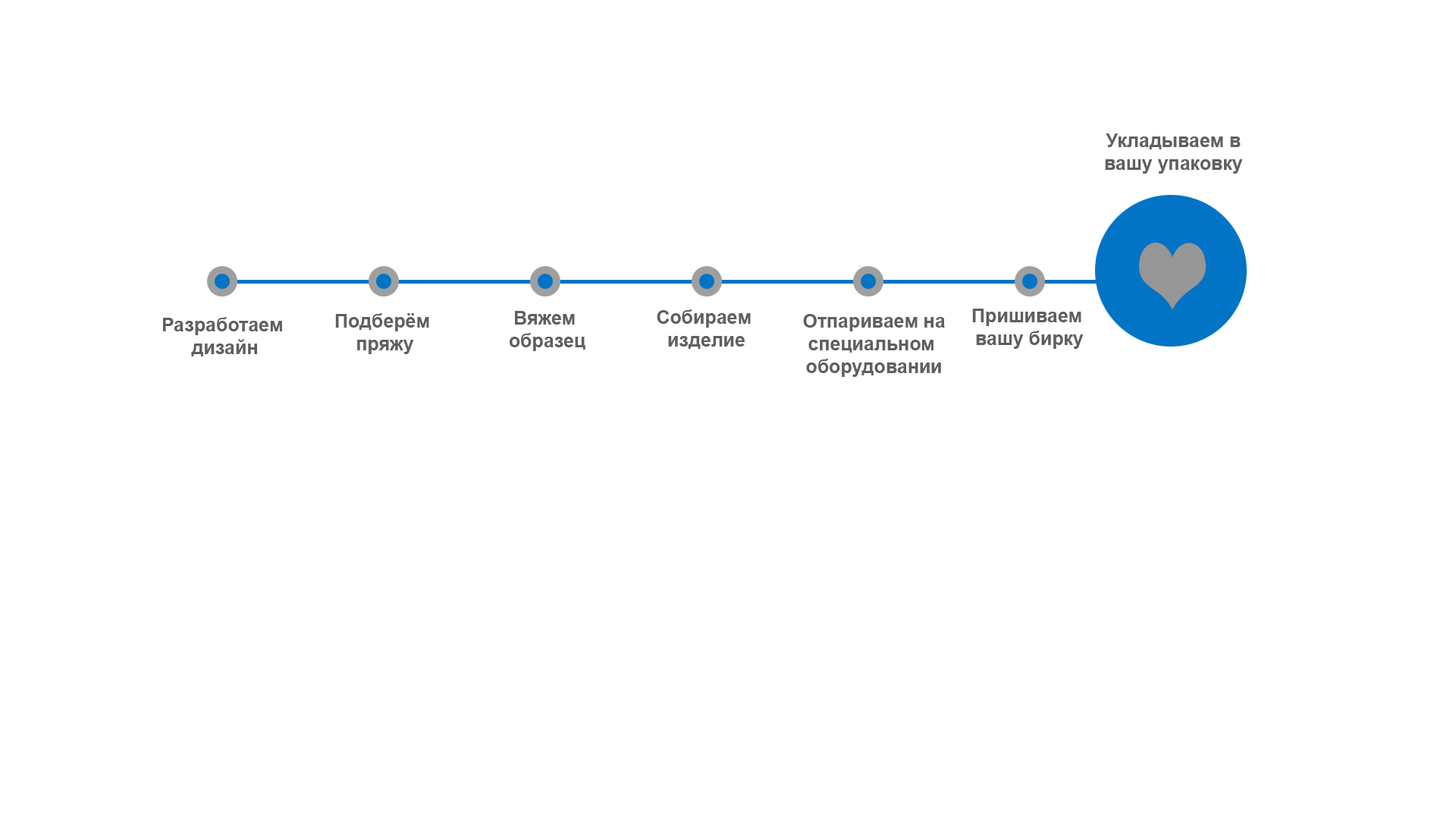
<style>
.page{position:relative;width:1456px;height:819px;background:#ffffff}
.page>*{position:absolute;margin:0}
.t1{font:19px "Arial-BoldMT";color:#5e605f}
</style>
<div class="page">
<p class="t1" style="left:1105px;top:133px;width:138px;height:41px;text-align:center">Укладываем в<br>вашу упаковку</p>
<p class="t1" style="left:163px;top:317px;width:119px;height:39px;text-align:center">Разработаем <br>дизайн</p>
<p class="t1" style="left:335px;top:313px;width:94px;height:41px;text-align:center">Подберём <br>пряжу</p>
<p class="t1" style="left:510px;top:311px;width:75px;height:40px;text-align:center">Вяжем <br>образец</p>
<p class="t1" style="left:657px;top:309px;width:94px;height:40px;text-align:center">Собираем <br>изделие</p>
<p class="t1" style="left:803px;top:314px;width:142px;height:63px;text-align:center">Отпариваем на<br>специальном <br>оборудовании</p>
<p class="t1" style="left:972px;top:309px;width:112px;height:40px;text-align:center">Пришиваем <br>вашу бирку</p>
</div>
